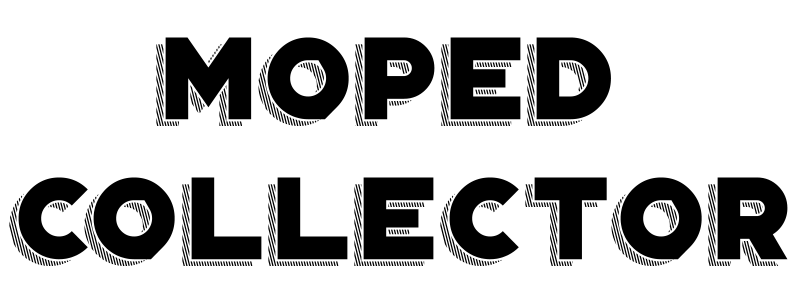
<style>
.page{position:relative;width:800px;height:300px;background:#ffffff}
.page>*{position:absolute;margin:0}
.t1{font:116.8px "Portico-Vintage";color:#000000}
</style>
<div class="page">
<p class="t1" style="left:9px;top:37px;width:779px;height:229px;text-align:center">Moped <br>Collector</p>
</div>
